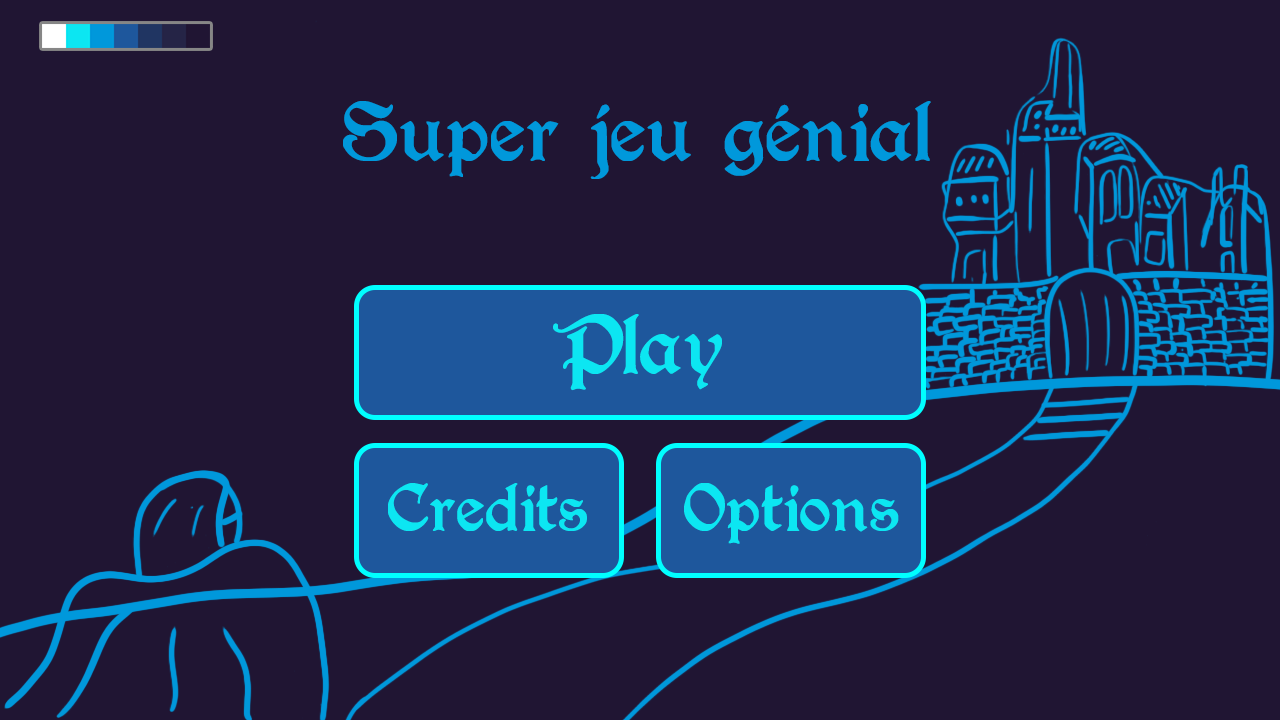
<style>
.page{position:relative;width:1280px;height:720px;background:#201533}
.page>*{position:absolute;margin:0}
.t1{font:60px "BerryRotunda-Regular";color:#0098db}
.t2{font:60px "BerryRotunda-Regular";color:#0ce6f2}
.t3{font:48px "BerryRotunda-Regular";color:#0ce6f2}
</style>
<div class="page">
<p class="t1" style="left:343px;top:101px;width:588px;height:78px">Super jeu génial</p>
<p class="t2" style="left:553px;top:314px;width:169px;height:77px">Play</p>
<p class="t3" style="left:388px;top:483px;width:199px;height:48px">Credits</p>
<p class="t3" style="left:684px;top:483px;width:215px;height:61px">Options</p>
</div>
